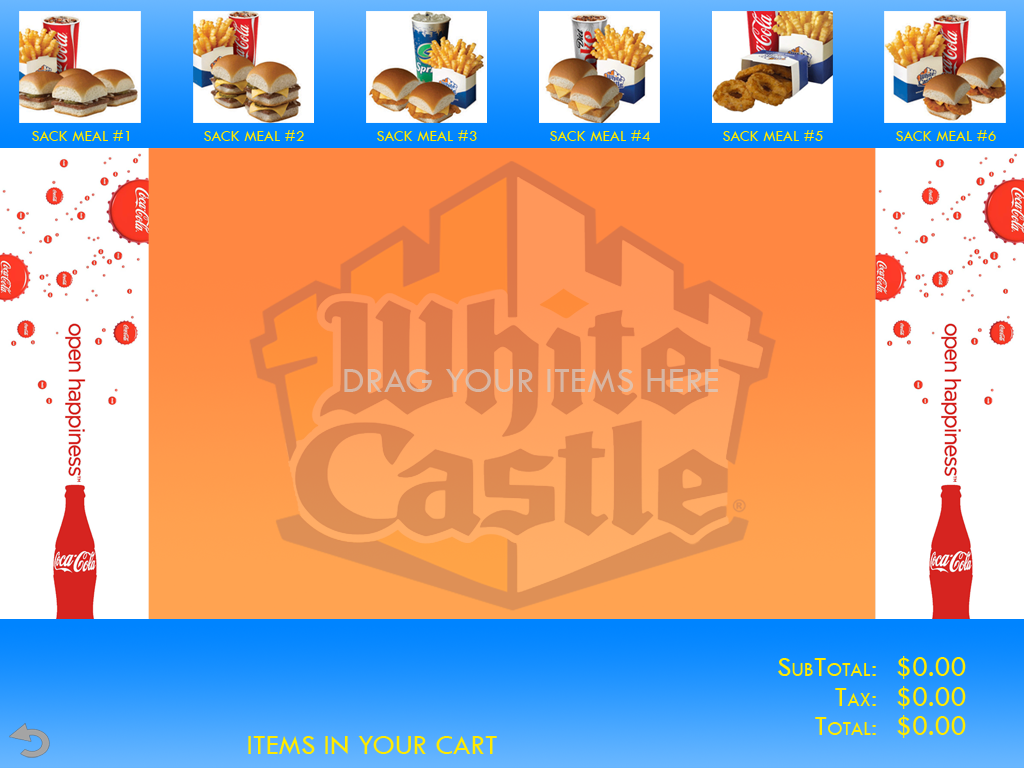
<style>
.page{position:relative;width:1024px;height:768px}
.page>*{position:absolute;margin:0}
.t1{font:16.1px "TwCenMT-Regular";letter-spacing:0.01em;color:#ffea00;font-variant:small-caps}
.t2{font:37px "TwCenMT-Regular";letter-spacing:0.01em;color:#d7b6a4;font-variant:small-caps}
.t3{font:28.6px "TwCenMT-Regular";letter-spacing:0.01em;color:#ffea00;font-variant:small-caps}
</style>
<div class="page">
<p class="t1" style="left:32px;top:130px;width:97px;height:11px">SACK MEAL #1</p>
<p class="t1" style="left:204px;top:130px;width:100px;height:11px">SACK MEAL #2</p>
<p class="t1" style="left:377px;top:130px;width:100px;height:11px">SACK MEAL #3</p>
<p class="t1" style="left:550px;top:130px;width:100px;height:11px">SACK MEAL #4</p>
<p class="t1" style="left:723px;top:130px;width:100px;height:11px">SACK MEAL #5</p>
<p class="t1" style="left:896px;top:130px;width:100px;height:11px">SACK MEAL #6</p>
<p class="t2" style="left:344px;top:369px;width:374px;height:23px">DRAG YOUR ITEMS HERE</p>
<p class="t3" style="left:778px;top:658px;width:98px;height:18px">SubTotal:</p>
<p class="t3" style="left:897px;top:656px;width:69px;height:23px">$0.00</p>
<p class="t3" style="left:835px;top:688px;width:41px;height:18px">Tax:</p>
<p class="t3" style="left:897px;top:686px;width:69px;height:23px">$0.00</p>
<p class="t3" style="left:815px;top:717px;width:61px;height:18px">Total:</p>
<p class="t3" style="left:897px;top:715px;width:69px;height:23px">$0.00</p>
<p class="t3" style="left:248px;top:736px;width:249px;height:18px">ITEMS IN YOUR CART</p>
</div>
